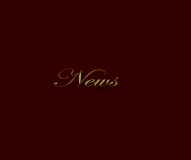
<style>
.page{position:relative;width:191px;height:160px;background:#330000}
.page>*{position:absolute;margin:0}
.t1{font:25.2px "EdwardianScriptITC";letter-spacing:0.025em;color:#9a9a58;scale:1.43 1}
</style>
<div class="page">
<p class="t1" style="left:54px;top:68px;width:65px;height:19px">News</p>
</div>
